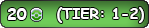
<style>
.page{position:relative;width:149px;height:28px}
.page>*{position:absolute;margin:0}
.t1{font:12px "ComicSansMS-Bold";color:#ffffff}
.t2{font:14.7px "ComicSansMS-Bold";color:#ffffff}
</style>
<div class="page">
<p class="t1" style="left:7px;top:8px;width:20px;height:12px">20</p>
<p class="t2" style="left:57px;top:7px;width:87px;height:16px">(TIER: 1-2)</p>
</div>
